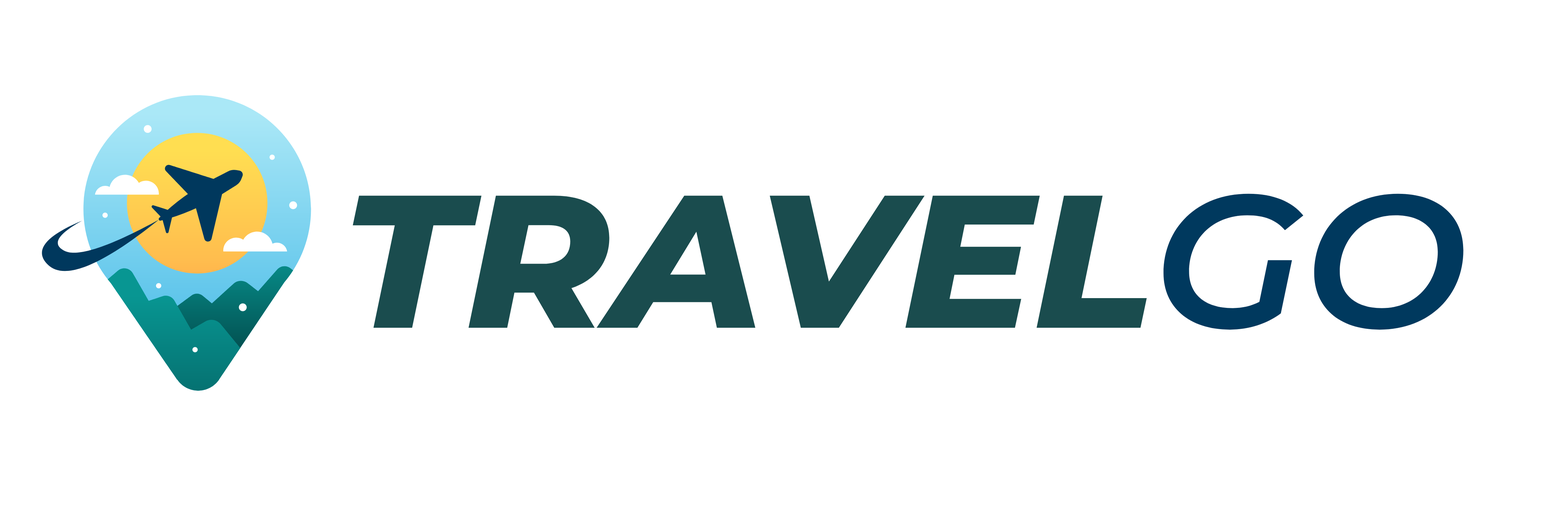
<style>
.page{position:relative;width:1568px;height:523px;background:#ffffff}
.page>*{position:absolute;margin:0}
.t1{font:188.6px "Montserrat-ExtraBoldItalic";color:#1a4c4e;scale:1.04 1}
.t2{font:188.6px "Montserrat-SemiBoldItalic";color:#00395e;scale:1.04 1}
</style>
<div class="page">
<p class="t1" style="left:353px;top:193px;width:1110px;height:137px">TRAVEL<span class="t2">GO</span></p>
</div>
